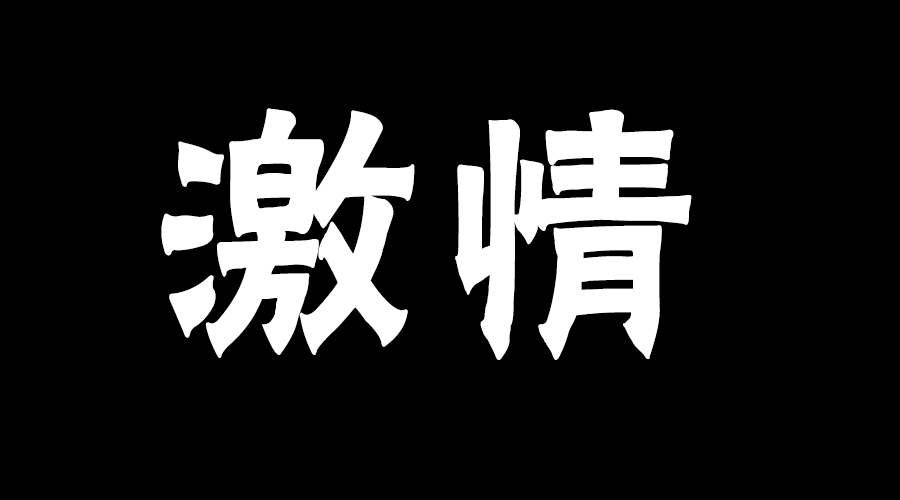
<style>
.page{position:relative;width:900px;height:500px;background:#000000}
.page>*{position:absolute;margin:0}
.t1{font:260px "FZYHFW--GB1-0";letter-spacing:0.1em;color:#ffffff}
</style>
<div class="page">
<p class="t1" style="left:161px;top:108px;width:531px;height:252px">激情</p>
</div>
